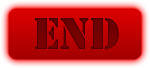
<style>
.page{position:relative;width:150px;height:68px}
.page>*{position:absolute;margin:0}
.t1{font:40.8px "StencilStd";color:#790303}
</style>
<div class="page">
<p class="t1" style="left:34px;top:18px;width:85px;height:31px">End</p>
</div>
